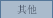
<style>
.page{position:relative;width:53px;height:18px;background:#aabbcc}
.page>*{position:absolute;margin:0}
.t1{font:10px "SimSun"}
</style>
<div class="page">
<p class="t1" style="left:17px;top:4px;width:20px;height:10px">其他</p>
</div>
